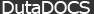
<style>
.page{position:relative;width:94px;height:14px;background:#333333}
.page>*{position:absolute;margin:0}
.t1{font:18px "Verdana";letter-spacing:-0.05em;color:#fefefe}
</style>
<div class="page">
<p class="t1" style="left:2px;top:1px;width:88px;height:13px">DutaDOCS</p>
</div>
